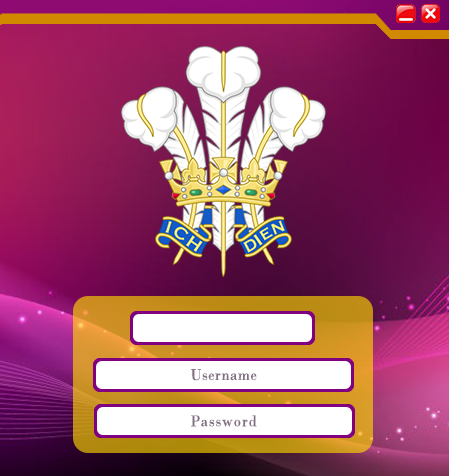
<style>
.page{position:relative;width:449px;height:476px}
.page>*{position:absolute;margin:0}
.t1{font:16.4px "BodoniMT";letter-spacing:0.02em;color:#816e82;scale:0.93 1}
.t2{font:16.4px "BodoniMT";letter-spacing:0.06em;color:#816e82;scale:0.93 1}
</style>
<div class="page">
<p class="t1" style="left:191px;top:369px;width:66px;height:12px">Username</p>
<p class="t2" style="left:191px;top:415px;width:66px;height:12px">Password</p>
</div>
